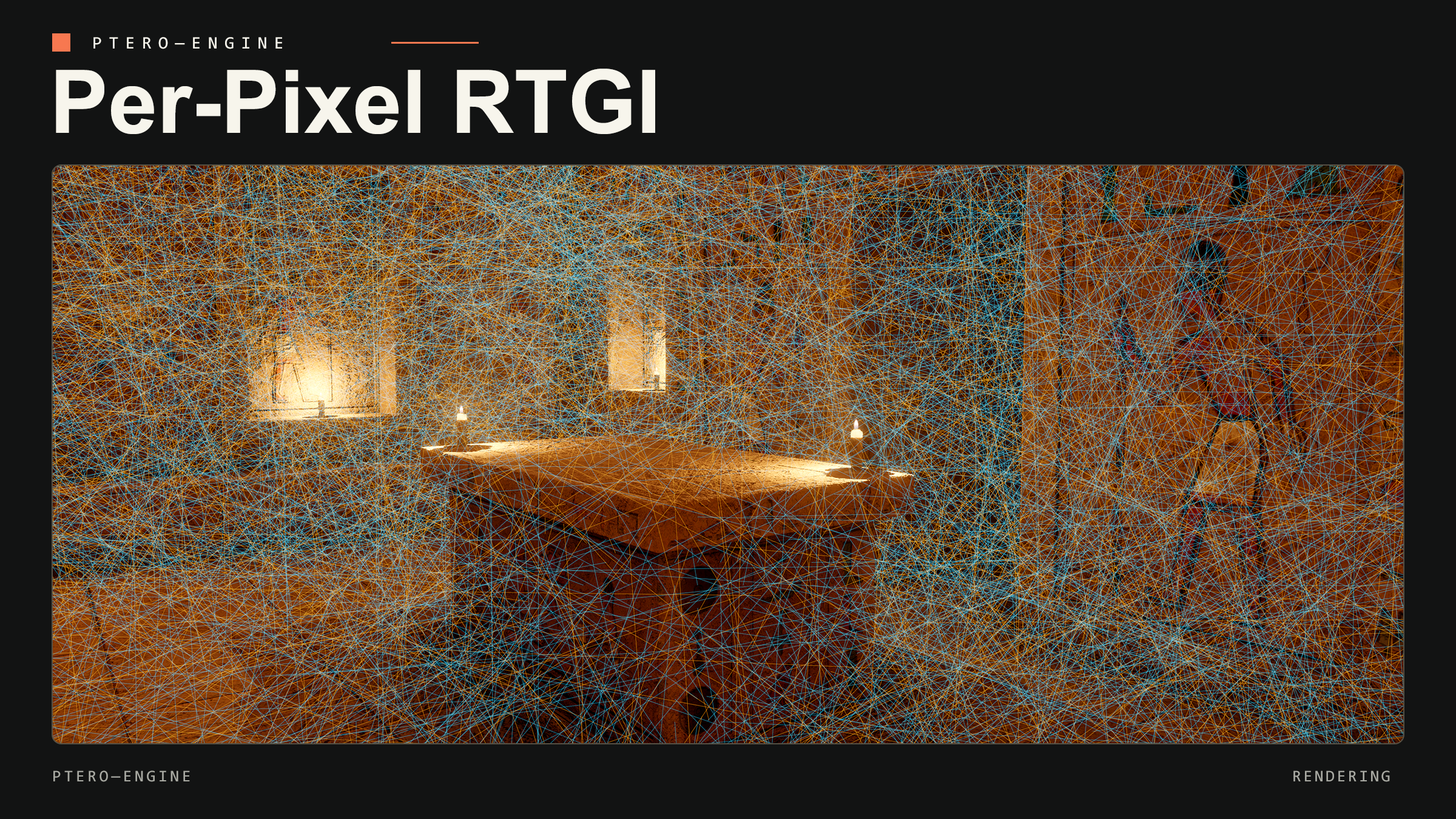
<style>
.page{position:relative;width:1456px;height:819px;background:#121313}
.page>*{position:absolute;margin:0}
.t1{font:17.6px "Consolas";letter-spacing:0.39em;color:#f7f5ec}
.t2{font:88px "Arial-BoldMT";color:#f7f5ec}
.t3{font:16.4px "Consolas";letter-spacing:0.17em;color:#a9aaa3}
.t4{font:16.4px "Consolas";letter-spacing:0.13em;color:#a9aaa3}
</style>
<div class="page">
<p class="t1" style="left:93px;top:37px;width:189px;height:12px">PTERO—ENGINE</p>
<p class="t2" style="left:56px;top:69px;width:599px;height:65px">Per-Pixel RTGI</p>
<p class="t3" style="left:53px;top:770px;width:137px;height:12px">PTERO—ENGINE</p>
<p class="t4" style="left:1293px;top:770px;width:97px;height:12px">RENDERING</p>
</div>
